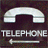
<style>
.page{position:relative;width:48px;height:48px}
.page>*{position:absolute;margin:0}
.t1{font:7.6px "ArialMT";letter-spacing:-0.02em;color:#dbe6e8;font-weight:bold}
</style>
<div class="page">
<p class="t1" style="left:1px;top:30px;width:47px;height:7px">TELEPHONE</p>
</div>
